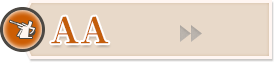
<style>
.page{position:relative;width:274px;height:66px;background:#e8d9c9}
.page>*{position:absolute;margin:0}
.t1{font:36px "RyuminPro-ExBold";color:#c35e0c}
</style>
<div class="page">
<p class="t1" style="left:51px;top:16px;width:58px;height:28px">AA</p>
</div>
